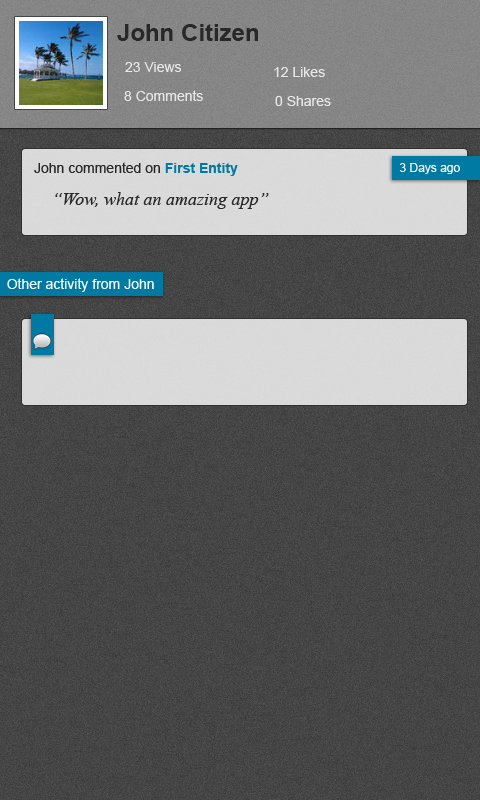
<style>
.page{position:relative;width:480px;height:800px}
.page>*{position:absolute;margin:0}
.t1{font:24px "Arial-BoldMT";color:#282828}
.t2{font:14px "ArialMT";color:#e7e7e7}
.t3{font:14px "ArialMT";color:#ffffff}
.t4{font:14px "ArialMT";color:#282828}
.t5{font:14px "Arial-BoldMT";color:#007aa2}
.t6{font:12px "ArialMT";color:#ffffff}
.t7{font:18px "TimesNewRomanPS-ItalicMT";color:#282828}
</style>
<div class="page">
<p class="t1" style="left:117px;top:24px;width:141px;height:17px">John Citizen</p>
<p class="t2" style="left:125px;top:62px;width:57px;height:10px">23 Views</p>
<p class="t3" style="left:274px;top:67px;width:51px;height:10px;opacity:0.8">12 Likes</p>
<p class="t2" style="left:124px;top:90px;width:79px;height:11px">8 Comments</p>
<p class="t3" style="left:275px;top:96px;width:56px;height:10px;opacity:0.8">0 Shares</p>
<p class="t4" style="left:34px;top:162px;width:204px;height:14px">John commented on <span class="t5">First Entity</span></p>
<p class="t6" style="left:399px;top:163px;width:61px;height:11px">3 Days ago</p>
<p class="t7" style="left:55px;top:192px;width:214px;height:17px">“Wow, what an amazing app”</p>
<p class="t3" style="left:7px;top:278px;width:147px;height:14px">Other activity from John</p>
</div>
